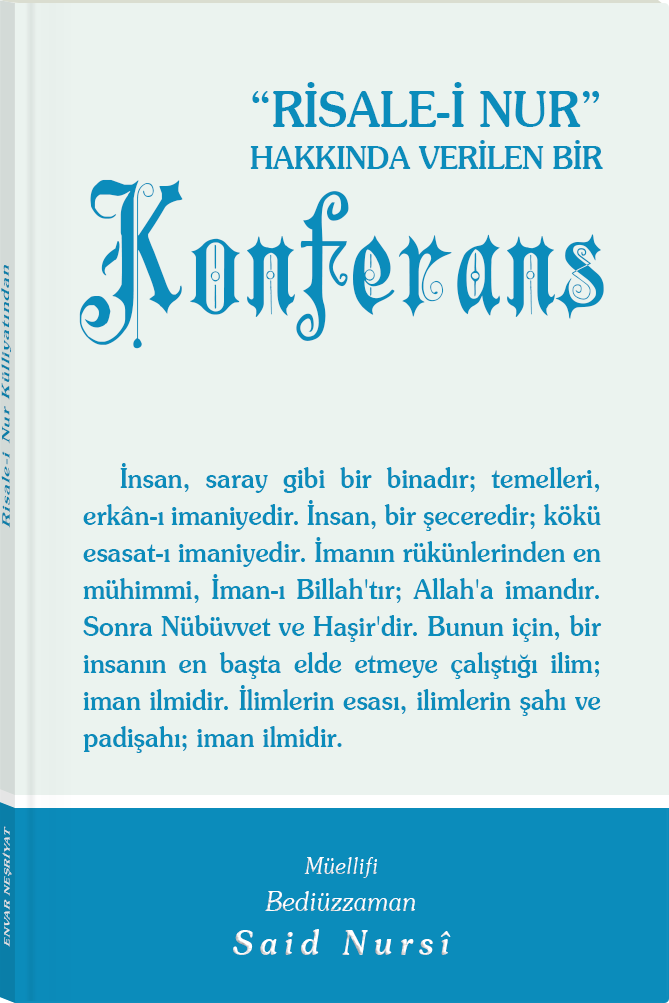
<style>
.page{position:relative;width:669px;height:1003px;background:#ebf3ef}
.page>*{position:absolute;margin:0}
.t1{font:30.9px/41.8px "Souvenir-Medium";color:#0b8cbb;scale:0.93 1}
.t2{font:49px/41.8px "Souvenir-Medium";color:#0b8cbb;scale:0.93 1}
.t3{font:179.9px "Barla © 001 Liva Nur";letter-spacing:-0.001em;color:#0b8cbb;scale:0.93 1}
.t4{font:11.4px "Souvenir-Medium";letter-spacing:0.08em;color:#0b8cbb;scale:1.65 1}
.t5{font:27.3px/37px "Souvenir-Medium";color:#0b8cbb;scale:0.92 1}
.t6{font:8.3px "Souvenir-Medium";letter-spacing:0.08em;color:#e5e5e5;scale:1.43 1}
.t7{font:27.1px/37.8px "Souvenir-LightItalic";color:#ffffff;scale:0.92 1}
.t8{font:22.8px/39.8px "Souvenir-LightItalic";color:#ffffff;scale:0.92 1}
.t9{font:33.9px/43.8px "Souvenir-MediumItalic";letter-spacing:0.2em;color:#ffffff;scale:0.92 1}
</style>
<div class="page">
<p class="t1" style="left:250px;top:82px;width:353px;height:87px;text-align:center"><span class="t2">“RİSALE-İ NUR”<br></span>HAKKINDA VERİLEN BİR</p>
<p class="t3" style="left:79px;top:179px;width:525px;height:170px">Konferans</p>
<p class="t4" style="left:1px;top:265px;width:10px;height:263px;rotate:-90deg">Risale-i Nur Külliyatından</p>
<p class="t5" style="left:83px;top:463px;width:519px;height:290px;text-align:justify">İnsan, saray gibi bir binadır; temelleri, erkân-ı imaniyedir. İnsan, bir şeceredir; kökü esasat-ı imaniyedir. İmanın rükünlerinden en mühimmi, İman-ı Billah'tır; Allah'a imandır. Sonra Nübüvvet ve Haşir'dir. Bunun için, bir insanın en başta elde etmeye çalıştığı ilim; iman ilmidir. İlimlerin esası, ilimlerin şahı ve padişahı; iman ilmidir.</p>
<p class="t6" style="left:2px;top:826px;width:10px;height:121px;rotate:-90deg">ENVAR NEŞRİYAT</p>
<p class="t7" style="left:233px;top:857px;width:218px;height:98px;text-align:center"><span class="t8">Müellifi<br></span>Bediüzzaman<br><span class="t9">Said Nursî</span></p>
</div>
